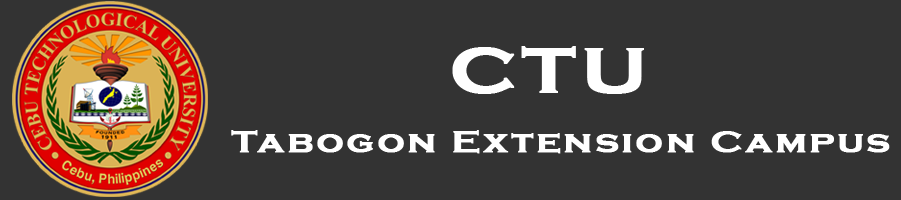
<style>
.page{position:relative;width:901px;height:200px;background:#333333}
.page>*{position:absolute;margin:0}
.t1{font:32px/60px "CopperplateGothic-Bold";letter-spacing:0.05em;color:#ffffff;font-weight:bold;scale:1.2 1}
.t2{font:66px/60px "CopperplateGothic-Bold";letter-spacing:0.05em;color:#ffffff;font-weight:bold;scale:1.2 1}
</style>
<div class="page">
<p class="t1" style="left:231px;top:46px;width:659px;height:108px;text-align:center"><span class="t2">CTU <br></span>Tabogon Extension Campus</p>
</div>
